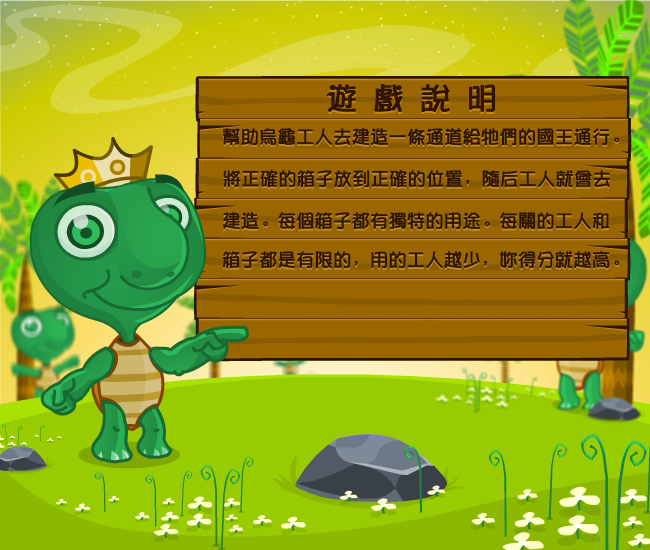
<style>
.page{position:relative;width:650px;height:550px}
.page>*{position:absolute;margin:0}
.t1{font:30px "Pop2EG-Bold-T-GB";font-weight:bold}
.t2{font:30px "Pop2EG-Bold-T-GB";color:#2f1500;font-weight:bold}
.t3{font:18px "Pop2EG-Bold-T-GB";font-weight:bold}
.t4{font:18px "Pop2EG-Bold-T-GB";color:#2f1500;font-weight:bold}
</style>
<div class="page">
<p class="t1" style="left:327px;top:86px;width:168px;height:28px">游 戏 说 明</p>
<p class="t2" style="left:327px;top:84px;width:168px;height:28px">游 戏 说 明</p>
<p class="t3" style="left:222px;top:130px;width:398px;height:18px">帮助乌龟工人去建造一条通道给它们的国王通行。</p>
<p class="t4" style="left:222px;top:128px;width:398px;height:18px">帮助乌龟工人去建造一条通道给它们的国王通行。</p>
<p class="t3" style="left:223px;top:172px;width:387px;height:18px">将正确的箱子放到正确的位置，随后工人就会去</p>
<p class="t4" style="left:223px;top:170px;width:387px;height:18px">将正确的箱子放到正确的位置，随后工人就会去</p>
<p class="t3" style="left:222px;top:214px;width:388px;height:18px">建造。每个箱子都有独特的用途。每关的工人和</p>
<p class="t4" style="left:222px;top:212px;width:388px;height:18px">建造。每个箱子都有独特的用途。每关的工人和</p>
<p class="t3" style="left:222px;top:253px;width:398px;height:18px">箱子都是有限的，用的工人越少，你得分就越高。</p>
<p class="t4" style="left:222px;top:251px;width:398px;height:18px">箱子都是有限的，用的工人越少，你得分就越高。</p>
</div>
